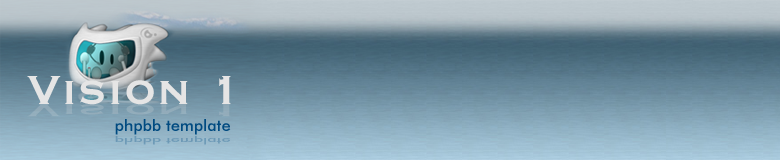
<style>
.page{position:relative;width:780px;height:160px}
.page>*{position:absolute;margin:0}
.t1{font:53.3px "CopperplateGothicBT-Bold";color:#e5e5e5}
.t2{font:23.3px "CopperplateGothicBT-Bold";color:#91abb9;scale:2.28 1}
.t3{font:16px "FuturaBT-Medium";color:#004a80}
.t4{font:8.6px "FuturaBT-Medium";color:#6c99b5;scale:1.86 1}
</style>
<div class="page">
<p class="t1" style="left:27px;top:76px;width:204px;height:29px">Vision 1</p>
<p class="t2" style="left:27px;top:104px;width:204px;height:13px">Vision 1</p>
<p class="t3" style="left:115px;top:119px;width:116px;height:16px">phpbb template</p>
<p class="t4" style="left:115px;top:136px;width:116px;height:9px">phpbb template</p>
</div>
